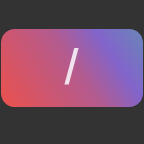
<style>
.page{position:relative;width:144px;height:144px;background:#333333}
.page>*{position:absolute;margin:0}
.t1{font:42px "Inter-Regular";color:#f7f1f8;font-weight:bold}
</style>
<div class="page">
<p class="t1" style="left:64px;top:48px;width:15px;height:37px;opacity:0.9">/</p>
</div>
